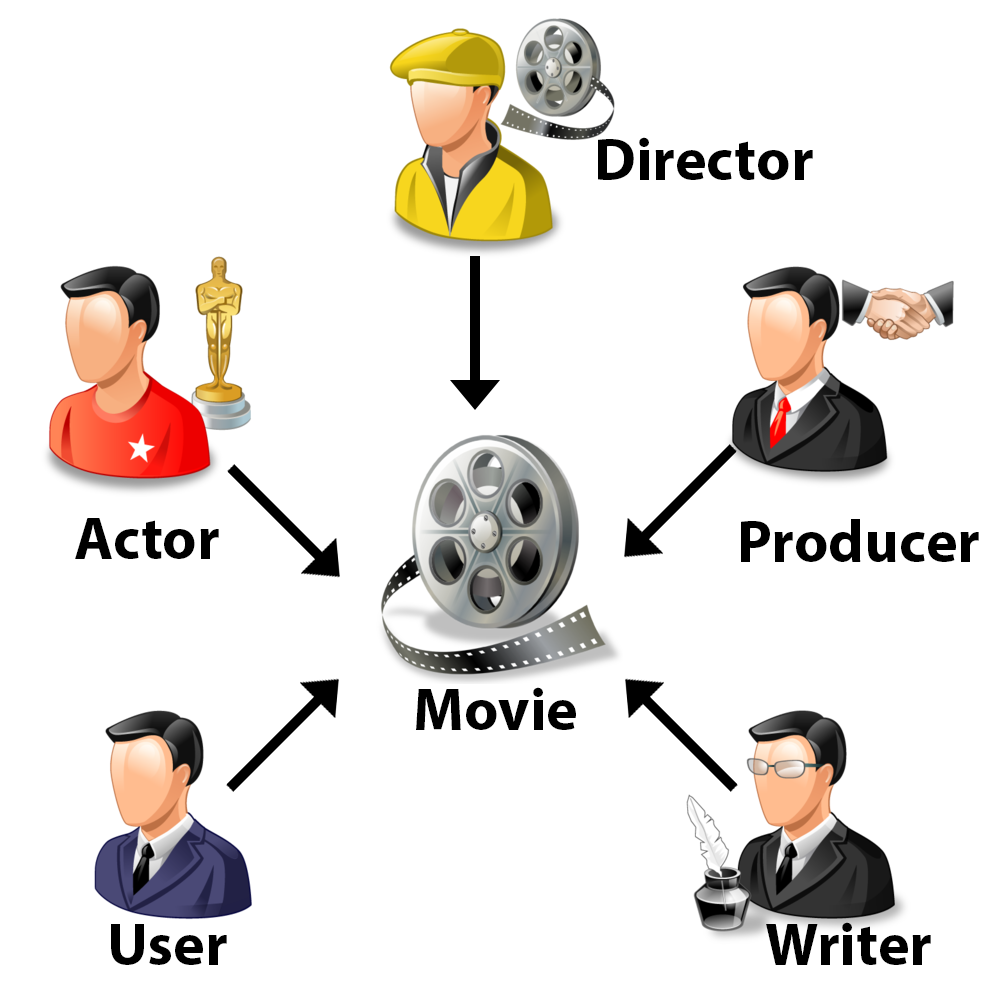
<style>
.page{position:relative;width:1000px;height:1000px;background:#ffffff}
.page>*{position:absolute;margin:0}
.t1{font:60px "MyriadPro-Bold";color:#000000}
</style>
<div class="page">
<p class="t1" style="left:598px;top:137px;width:215px;height:43px">Director</p>
<p class="t1" style="left:75px;top:518px;width:144px;height:41px">Actor</p>
<p class="t1" style="left:741px;top:519px;width:238px;height:43px">Producer</p>
<p class="t1" style="left:416px;top:687px;width:160px;height:43px">Movie</p>
<p class="t1" style="left:111px;top:924px;width:116px;height:41px">User</p>
<p class="t1" style="left:766px;top:922px;width:165px;height:43px">Writer</p>
</div>
